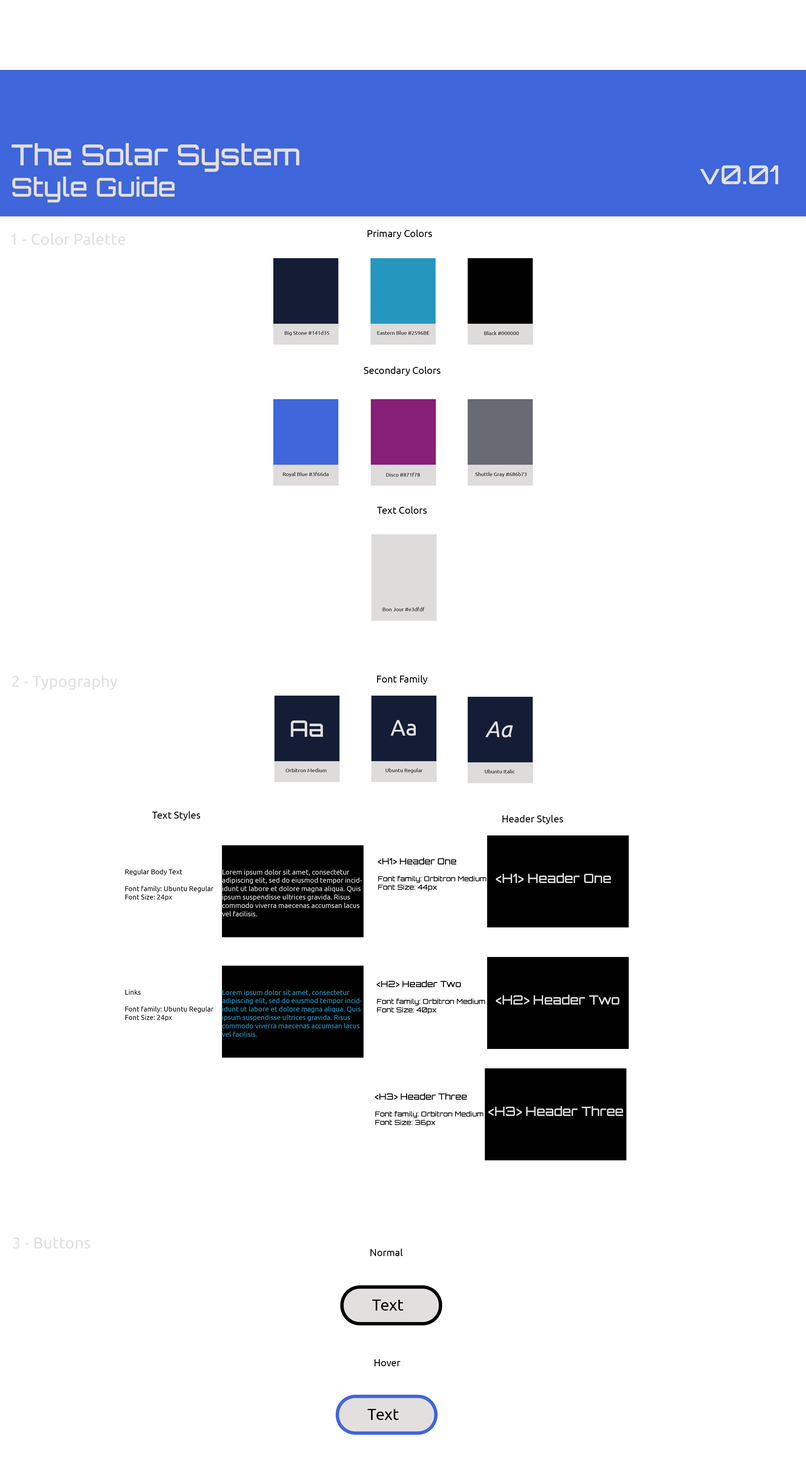
<style>
.page{position:relative;width:806px;height:1480px;background:#ffffff}
.page>*{position:absolute;margin:0}
.t1{font:29px "Orbitron-Medium";color:#e3dfdf}
.t2{font:26.1px "Orbitron-Medium";color:#e3dfdf}
.t3{font:16px "Ubuntu-Regular";color:#e3dfdf}
.t4{font:9.9px "Ubuntu-Regular";color:#000000}
.t5{font:5.2px "Ubuntu-Regular";color:#000000}
.t6{font:22.6px "Orbitron-Medium";color:#e3dfdf}
.t7{font:22.6px "Ubuntu-Regular";color:#e3dfdf}
.t8{font:22.6px "Ubuntu-Italic";color:#e3dfdf}
.t9{font:7px "Orbitron-Medium";color:#000000}
.t10{font:8.7px "Orbitron-Medium";color:#000000}
.t11{font:7px "Ubuntu-Regular";color:#000000}
.t12{font:7px "Ubuntu-Regular";color:#dedbdb}
.t13{font:12.8px "Orbitron-Medium";color:#dedbdb}
.t14{font:7px "Ubuntu-Regular";color:#2596be}
.t15{font:16px "Ubuntu-Regular";color:#000000}
</style>
<div class="page">
<p class="t1" style="left:12px;top:143px;width:287px;height:59px">The Solar System<br><span class="t2">Style Guide</span></p>
<p class="t2" style="left:700px;top:165px;width:78px;height:19px">v0.01</p>
<p class="t3" style="left:11px;top:233px;width:114px;height:12px">1 - Color Palette</p>
<p class="t4" style="left:367px;top:229px;width:65px;height:10px">Primary Colors</p>
<p class="t5" style="left:285px;top:331px;width:44px;height:5px">Big Stone #141d35</p>
<p class="t5" style="left:377px;top:331px;width:53px;height:4px">Eastern Blue #2596BE</p>
<p class="t5" style="left:484px;top:331px;width:35px;height:4px">Black #000000</p>
<p class="t4" style="left:364px;top:366px;width:76px;height:10px">Secondary Colors</p>
<p class="t5" style="left:283px;top:472px;width:46px;height:5px">Royal Blue #3f66da</p>
<p class="t5" style="left:386px;top:472px;width:34px;height:5px">Disco #871f78</p>
<p class="t5" style="left:475px;top:472px;width:52px;height:5px">Shuttle Gray #686b73</p>
<p class="t4" style="left:377px;top:506px;width:50px;height:8px">Text Colors</p>
<p class="t5" style="left:383px;top:607px;width:41px;height:4px">Bon Jour #e3dfdf</p>
<p class="t3" style="left:12px;top:675px;width:105px;height:15px">2 - Typography</p>
<p class="t4" style="left:377px;top:675px;width:51px;height:9px">Font Family</p>
<p class="t6" style="left:291px;top:720px;width:32px;height:17px">Aa</p>
<p class="t7" style="left:390px;top:720px;width:26px;height:16px">Aa</p>
<p class="t8" style="left:485px;top:721px;width:28px;height:16px">Aa</p>
<p class="t5" style="left:286px;top:768px;width:40px;height:4px">Orbitron Medium</p>
<p class="t5" style="left:385px;top:768px;width:38px;height:5px">Ubuntu Regular</p>
<p class="t5" style="left:485px;top:769px;width:30px;height:4px">Ubuntu Italic</p>
<p class="t4" style="left:152px;top:811px;width:48px;height:9px">Text Styles</p>
<p class="t4" style="left:502px;top:815px;width:61px;height:9px">Header Styles</p>
<p class="t9" style="left:378px;top:858px;width:108px;height:33px"><span class="t10">&lt;H1&gt; Header One<br></span><br>Font family: Orbitron Medium<br>Font Size: 44px</p>
<p class="t11" style="left:125px;top:869px;width:88px;height:32px">Regular Body Text<br><br>Font family: Ubuntu Regular<br>Font Size: 24px</p>
<p class="t12" style="left:222px;top:869px;width:140px;height:47px">Lorem ipsum dolor sit amet, consectetur adipiscing elit, sed do eiusmod tempor incididunt ut labore et dolore magna aliqua. Quis ipsum suspendisse ultrices gravida. Risus commodo viverra maecenas accumsan lacus vel facilisis.</p>
<p class="t13" style="left:496px;top:873px;width:115px;height:10px">&lt;H1&gt; Header One</p>
<p class="t11" style="left:125px;top:989px;width:88px;height:32px">Links<br><br>Font family: Ubuntu Regular<br>Font Size: 24px</p>
<p class="t14" style="left:222px;top:990px;width:140px;height:47px">Lorem ipsum dolor sit amet, consectetur adipiscing elit, sed do eiusmod tempor incididunt ut labore et dolore magna aliqua. Quis ipsum suspendisse ultrices gravida. Risus commodo viverra maecenas accumsan lacus vel facilisis.</p>
<p class="t9" style="left:376px;top:980px;width:109px;height:34px"><span class="t10">&lt;H2&gt; Header Two<br></span><br>Font family: Orbitron Medium<br>Font Size: 40px</p>
<p class="t13" style="left:496px;top:995px;width:123px;height:9px">&lt;H2&gt; Header Two</p>
<p class="t9" style="left:375px;top:1093px;width:108px;height:34px"><span class="t10">&lt;H3&gt; Header Three<br></span><br>Font family: Orbitron Medium<br>Font Size: 36px</p>
<p class="t13" style="left:488px;top:1106px;width:135px;height:10px">&lt;H3&gt; Header Three</p>
<p class="t3" style="left:13px;top:1237px;width:77px;height:11px">3 - Buttons</p>
<p class="t4" style="left:370px;top:1248px;width:33px;height:8px">Normal</p>
<p class="t15" style="left:372px;top:1299px;width:31px;height:11px">Text</p>
<p class="t4" style="left:374px;top:1359px;width:26px;height:7px">Hover</p>
<p class="t15" style="left:367px;top:1409px;width:32px;height:11px">Text</p>
</div>
